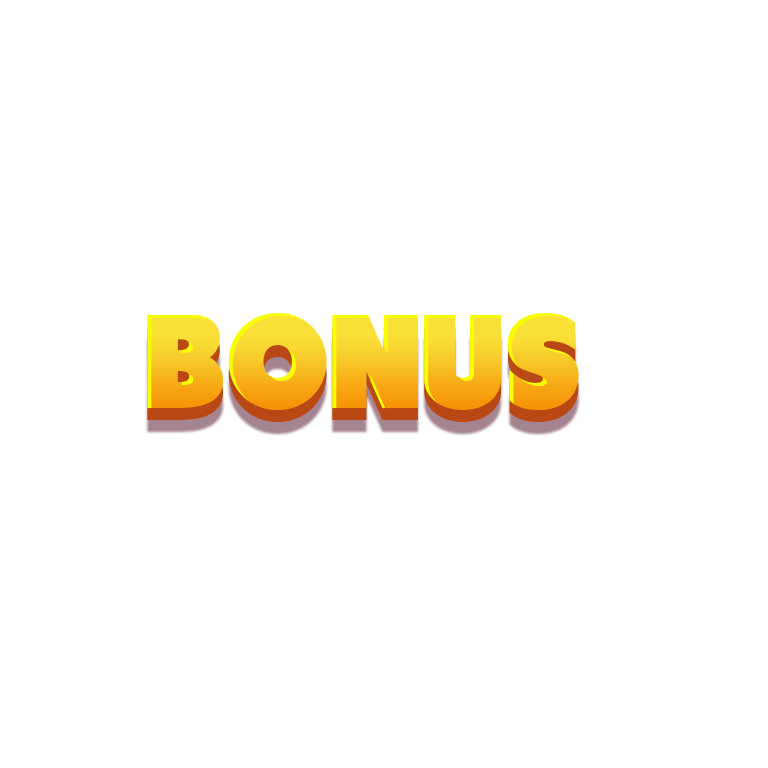
<style>
.page{position:relative;width:768px;height:768px;background:#ffffff}
.page>*{position:absolute;margin:0}
.t1{font:133px "Tondu-Beta"}
</style>
<div class="page">
<p class="t1" style="left:147px;top:313px;width:432px;height:97px">BONUS</p>
<p class="t1" style="left:147px;top:325px;width:432px;height:97px">BONUS</p>
</div>
